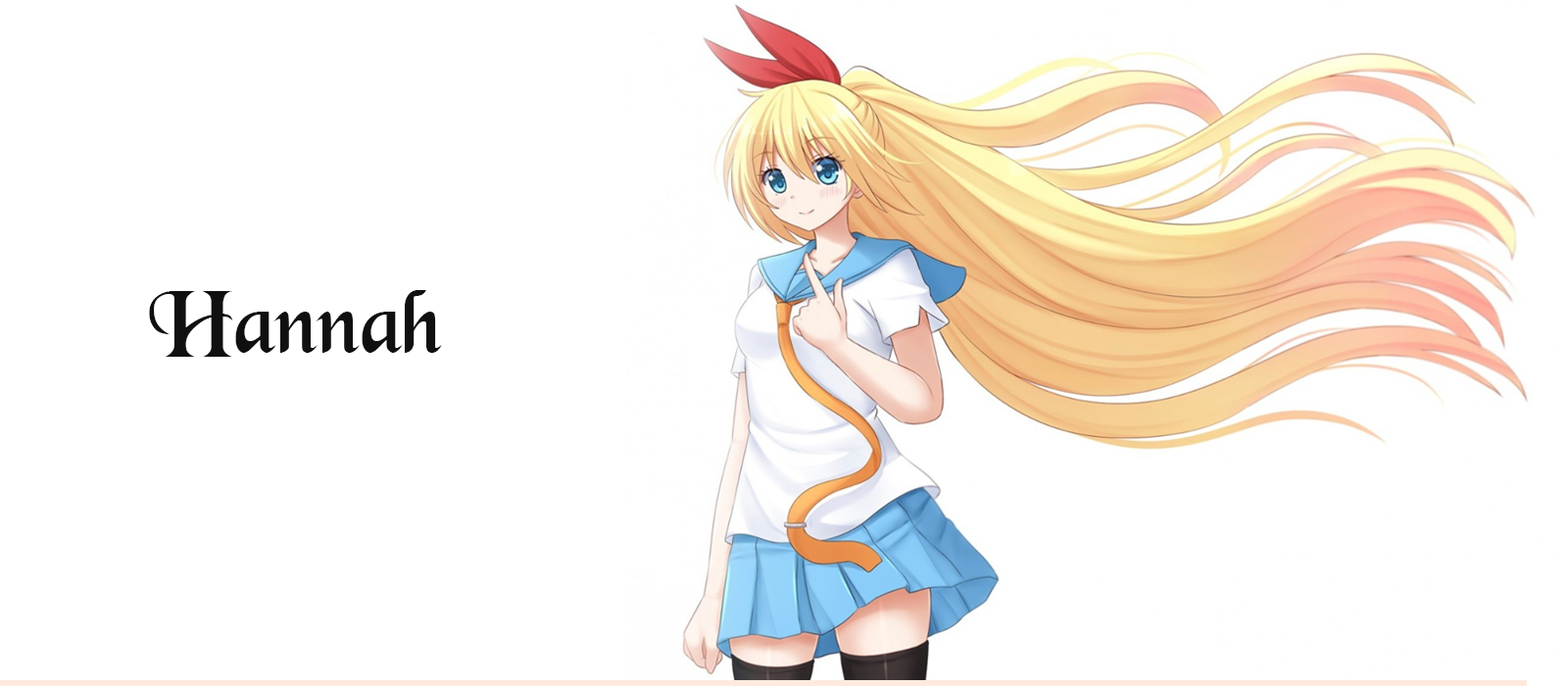
<style>
.page{position:relative;width:1568px;height:686px;background:#ffffff}
.page>*{position:absolute;margin:0}
.t1{font:93.1px "BlackChancery";color:#101010}
</style>
<div class="page">
<p class="t1" style="left:149px;top:290px;width:293px;height:67px">Hannah</p>
</div>
